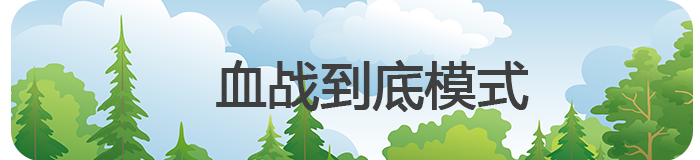
<style>
.page{position:relative;width:700px;height:160px}
.page>*{position:absolute;margin:0}
.t1{font:51px "MicrosoftYaHei";color:#3f3f3f;font-weight:bold}
</style>
<div class="page">
<p class="t1" style="left:216px;top:60px;width:313px;height:52px">血战到底模式</p>
</div>
